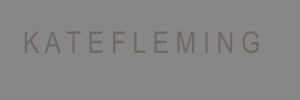
<style>
.page{position:relative;width:300px;height:100px;background:#878787}
.page>*{position:absolute;margin:0}
.t1{font:30px "ArialNarrow";color:#6f6a65}
</style>
<div class="page">
<p class="t1" style="left:24px;top:31px;width:235px;height:23px">K A T E F L E M I N G</p>
</div>
